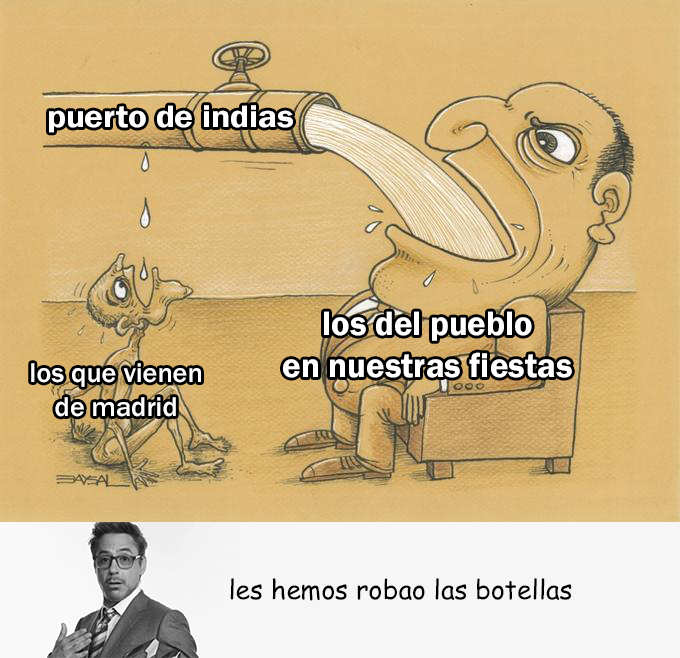
<style>
.page{position:relative;width:680px;height:658px}
.page>*{position:absolute;margin:0}
.t1{font:31.8px "FranklinGothic-Demi";color:#ffffff;scale:1.1 1}
.t2{font:34.7px "FranklinGothic-Demi";color:#ffffff}
.t3{font:28.1px "FranklinGothic-Medium";color:#ffffff}
.t4{font:26.4px "ComicSansMS";color:#000000}
</style>
<div class="page">
<p class="t1" style="left:49px;top:105px;width:244px;height:28px">puerto de indias</p>
<p class="t2" style="left:283px;top:311px;width:289px;height:67px;text-align:center">los del pueblo<br>en nuestras fiestas</p>
<p class="t3" style="left:31px;top:363px;width:170px;height:54px;text-align:center">los que vienen<br>de madrid</p>
<p class="t4" style="left:230px;top:578px;width:342px;height:23px">les hemos robao las botellas</p>
</div>
